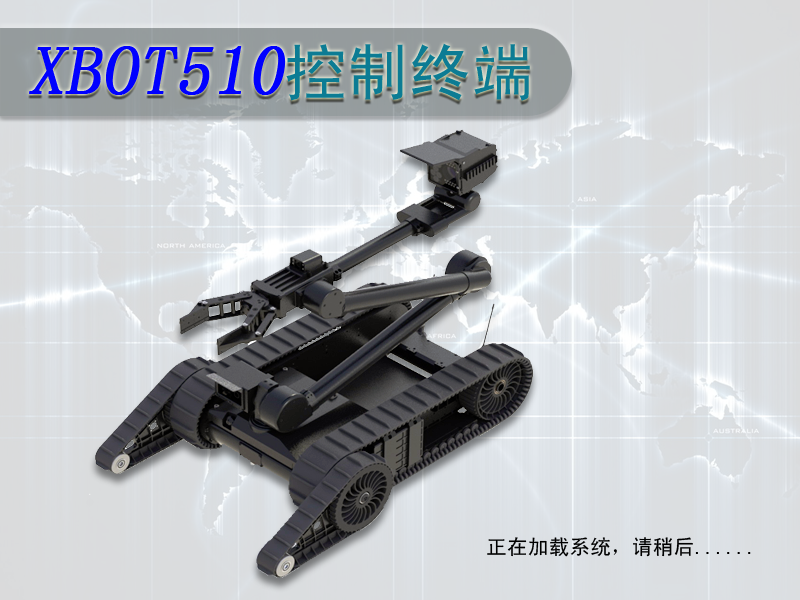
<style>
.page{position:relative;width:800px;height:600px}
.page>*{position:absolute;margin:0}
.t1{font:69.4px "SimSun";color:#0000ff;font-weight:bold;font-style:italic}
.t2{font:62.5px "SimHei";color:#0c7c94}
.t3{font:20.8px "SimHei";color:#000000}
</style>
<div class="page">
<p class="t1" style="left:29px;top:43px;width:501px;height:58px">XBOT510<span class="t2">控制终端</span></p>
<p class="t3" style="left:487px;top:537px;width:264px;height:20px">正在加载系统，请稍后......</p>
</div>
